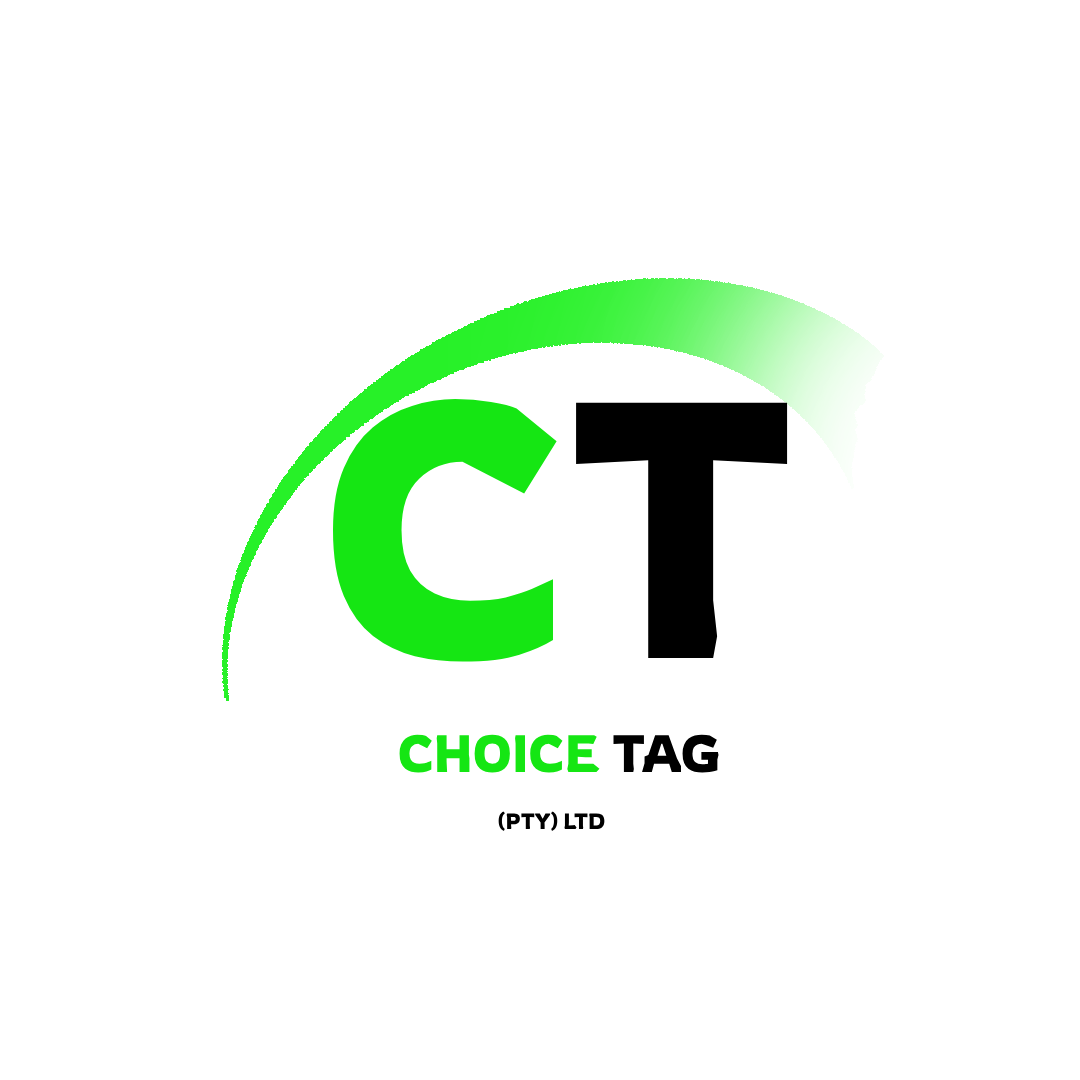
<style>
.page{position:relative;width:1080px;height:1080px;background:#ffffff}
.page>*{position:absolute;margin:0}
.t1{font:360.7px "Rowdies-Regular";color:#15e613}
.t2{font:360.7px "Rowdies-Regular";color:#000000}
.t3{font:52px "Rowdies-Regular";color:#15e613}
.t4{font:52px "Rowdies-Regular";color:#000000}
.t5{font:22px "Rowdies-Regular";color:#000000}
</style>
<div class="page">
<p class="t1" style="left:332px;top:399px;width:456px;height:263px">C<span class="t2">T</span></p>
<p class="t3" style="left:399px;top:734px;width:320px;height:39px">CHOICE <span class="t4">TAG</span></p>
<p class="t5" style="left:498px;top:811px;width:107px;height:20px">(PTY) LTD</p>
</div>
